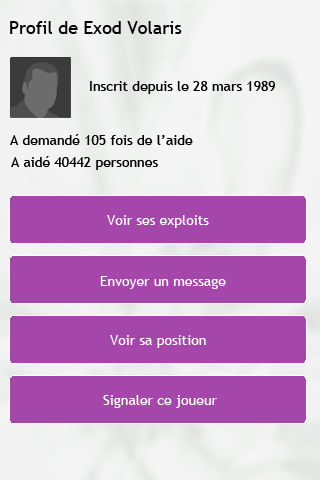
<style>
.page{position:relative;width:320px;height:480px;background:#a546ab}
.page>*{position:absolute;margin:0}
.t1{font:18px "TrebuchetMS";color:#000000}
.t2{font:14px "TrebuchetMS";color:#010101}
.t3{font:14px "TrebuchetMS";color:#ffffff}
</style>
<div class="page">
<p class="t1" style="left:10px;top:21px;width:172px;height:13px">Profil de Exod Volaris</p>
<p class="t2" style="left:90px;top:81px;width:185px;height:13px">Inscrit depuis le 28 mars 1989</p>
<p class="t2" style="left:10px;top:134px;width:183px;height:11px">A demandé 105 fois de l’aide</p>
<p class="t2" style="left:11px;top:156px;width:147px;height:14px">A aidé 40442 personnes</p>
<p class="t3" style="left:107px;top:215px;width:102px;height:13px">Voir ses exploits</p>
<p class="t3" style="left:100px;top:276px;width:126px;height:13px">Envoyer un message</p>
<p class="t3" style="left:110px;top:335px;width:96px;height:13px">Voir sa position</p>
<p class="t3" style="left:103px;top:395px;width:114px;height:13px">Signaler ce joueur</p>
</div>
